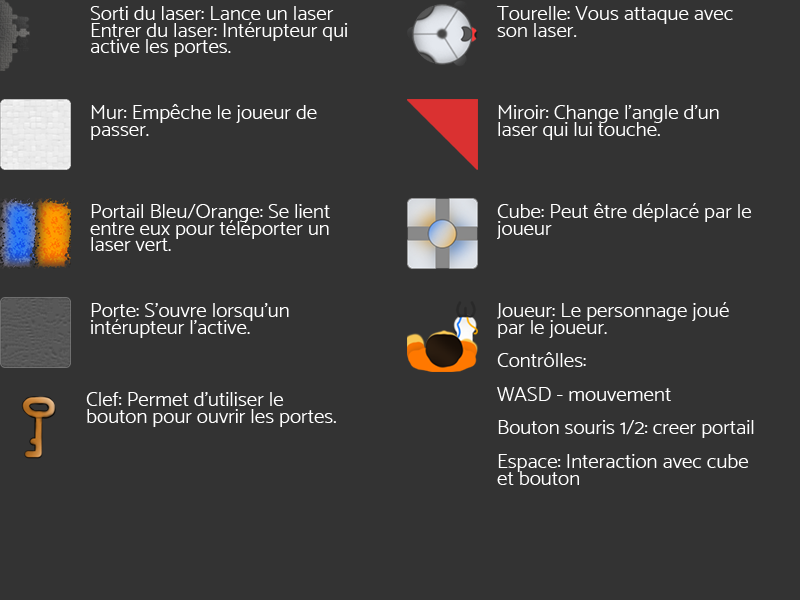
<style>
.page{position:relative;width:800px;height:600px;background:#333333}
.page>*{position:absolute;margin:0}
.t1{font:19px "Catamaran-Light";color:#ffffff;scale:1.11 1}
</style>
<div class="page">
<p class="t1" style="left:90px;top:6px;width:258px;height:51px">Sorti du laser: Lance un laser<br>Entrer du laser: Intérupteur qui active les portes.</p>
<p class="t1" style="left:497px;top:6px;width:236px;height:31px">Tourelle: Vous attaque avec son laser.</p>
<p class="t1" style="left:91px;top:104px;width:226px;height:36px">Mur: Empêche le joueur de passer.</p>
<p class="t1" style="left:498px;top:105px;width:221px;height:35px">Miroir: Change l’angle d’un laser qui lui touche.</p>
<p class="t1" style="left:90px;top:204px;width:240px;height:47px">Portail Bleu/Orange: Se lient entre eux pour téléporter un laser vert.</p>
<p class="t1" style="left:497px;top:203px;width:255px;height:36px">Cube: Peut être déplacé par le joueur</p>
<p class="t1" style="left:90px;top:303px;width:199px;height:35px">Porte: S’ouvre lorsqu’un intérupteur l’active.</p>
<p class="t1" style="left:497px;top:302px;width:257px;height:183px">Joueur: Le personnage joué par le joueur.<br><br>Contrôlles:<br><br>WASD - mouvement<br><br>Bouton souris 1/2: creer portail<br><br>Espace: Interaction avec cube et bouton</p>
<p class="t1" style="left:86px;top:392px;width:250px;height:35px">Clef: Permet d’utiliser le bouton pour ouvrir les portes.</p>
</div>
